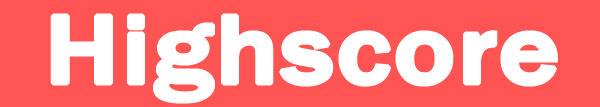
<style>
.page{position:relative;width:600px;height:107px;background:#ff5454}
.page>*{position:absolute;margin:0}
.t1{font:100px "FranklinGothic-Medium";color:#ffffff;font-weight:bold;scale:1.15 1}
</style>
<div class="page">
<p class="t1" style="left:50px;top:13px;width:508px;height:91px">Highscore</p>
</div>
